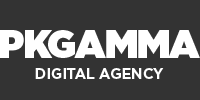
<style>
.page{position:relative;width:200px;height:100px;background:#333333}
.page>*{position:absolute;margin:0}
.t1{font:38.5px "Gotham-Ultra";letter-spacing:-0.035em;color:#ffffff}
.t2{font:15px "Gotham-Bold";letter-spacing:-0.025em;color:#ffffff}
</style>
<div class="page">
<p class="t1" style="left:0px;top:30px;width:200px;height:28px">PKGAMMA</p>
<p class="t2" style="left:35px;top:68px;width:129px;height:11px">DIGITAL AGENCY</p>
</div>
